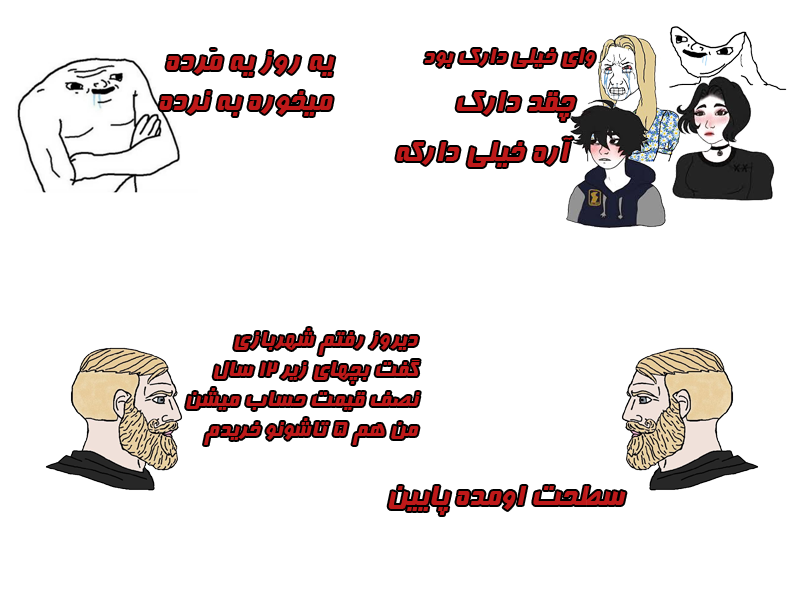
<style>
.page{position:relative;width:800px;height:600px;background:#ffffff}
.page>*{position:absolute;margin:0}
.t1{font:33.3px "Far.Farnaz";color:#be1919}
.t2{font:25px "Far.Farnaz";color:#be1919}
</style>
<div class="page">
<p class="t1" style="left:159px;top:49px;width:176px;height:67px">یه روز یه مَرده <br>میخوره به نرده</p>
<p class="t2" style="left:424px;top:49px;width:171px;height:18px">وای خیلی دارک بود</p>
<p class="t1" style="left:456px;top:92px;width:120px;height:29px">چقد دارک</p>
<p class="t1" style="left:396px;top:137px;width:177px;height:30px">آره خیلی دارکه</p>
<p class="t2" style="left:186px;top:328px;width:234px;height:117px">دیروز رفتم شهربازی<br>گفت بچهای زیر ۱۲ سال<br>نصف قیمت حساب میشن<br>من هم ۵ تاشونو خریدم</p>
<p class="t1" style="left:388px;top:486px;width:238px;height:29px">سطحت اومده پایین</p>
</div>
